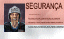
<style>
.page{position:relative;width:64px;height:39px}
.page>*{position:absolute;margin:0}
.t1{font:8.1px "ArialMT";color:#592010;scale:0.72 1}
</style>
<div class="page">
<p class="t1" style="left:25px;top:2px;width:38px;height:9px">SEGURANÇA</p>
</div>
